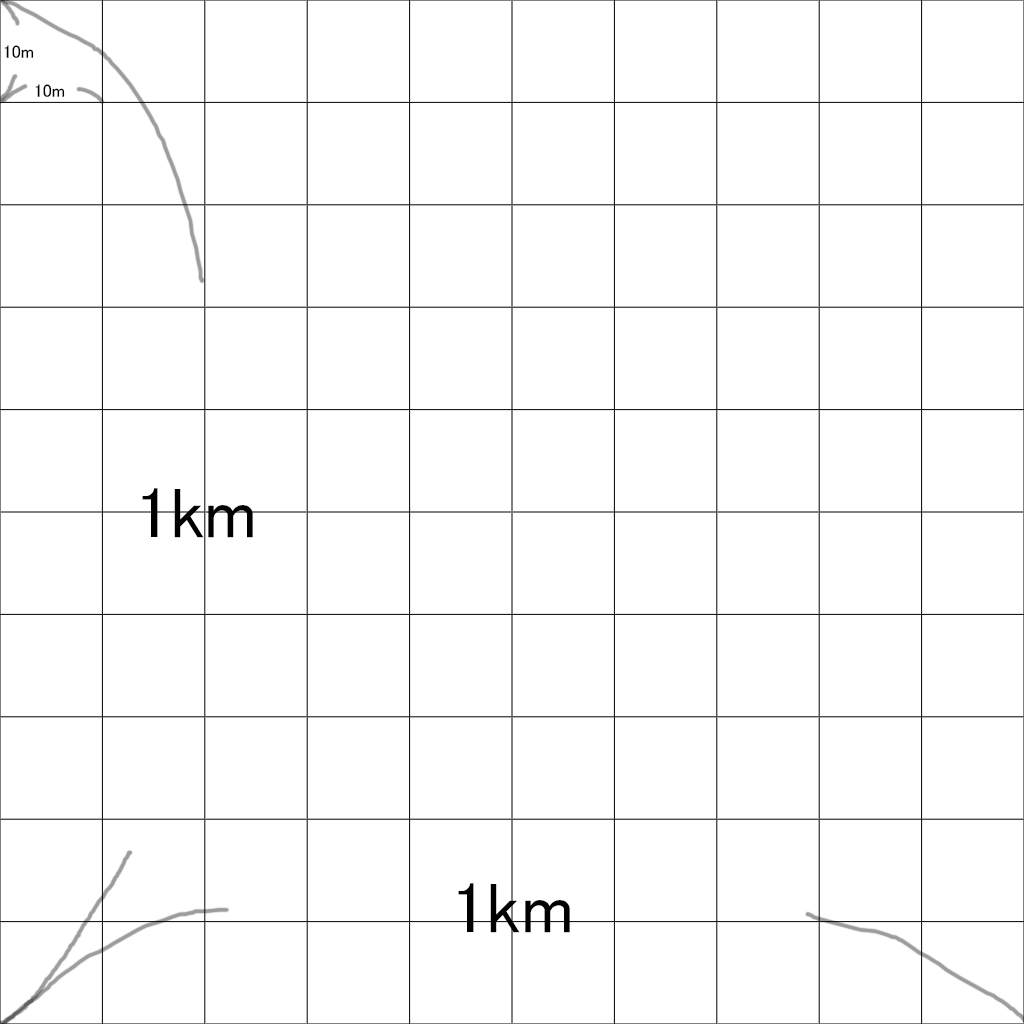
<style>
.page{position:relative;width:1024px;height:1024px;background:#ffffff}
.page>*{position:absolute;margin:0}
.t1{font:18px "MS-PGothic";color:#000000}
.t2{font:72px "MS-PGothic";color:#000000}
</style>
<div class="page">
<p class="t1" style="left:4px;top:45px;width:30px;height:13px">10m</p>
<p class="t1" style="left:35px;top:84px;width:30px;height:13px">10m</p>
<p class="t2" style="left:142px;top:488px;width:111px;height:50px">1km</p>
<p class="t2" style="left:458px;top:883px;width:112px;height:50px">1km</p>
</div>
